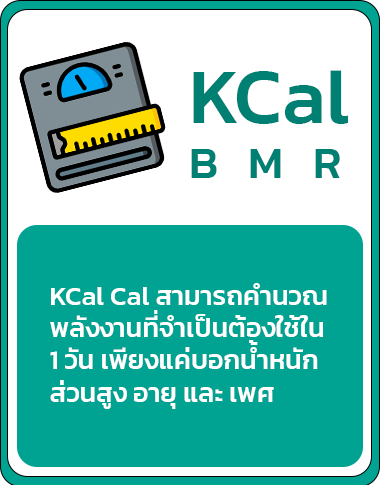
<style>
.page{position:relative;width:380px;height:485px;background:#00a291}
.page>*{position:absolute;margin:0}
.t1{font:45.8px "Kanit-Medium";color:#008073}
.t2{font:79.2px "Kanit-Medium";color:#008073}
.t3{font:27px "Kanit-Medium";color:#ffffff}
</style>
<div class="page">
<p class="t1" style="left:191px;top:70px;width:157px;height:108px"><span class="t2">KCal<br></span>B   M   R</p>
<p class="t3" style="left:50px;top:283px;width:277px;height:126px">KCal Cal สามารถคำนวณ<br>พลังงานที่จำเป็นต้องใช้ใน  <br>1 วัน เพียงแค่บอกน้ำหนัก  <br>ส่วนสูง อายุ และ เพศ</p>
</div>
